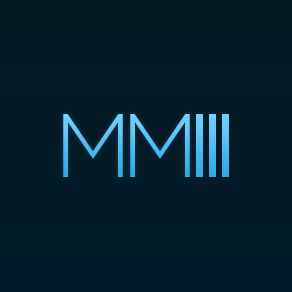
<style>
.page{position:relative;width:292px;height:292px}
.page>*{position:absolute;margin:0}
.t1{font:90px "GothamLight";letter-spacing:-0.08em;color:#57bff4}
</style>
<div class="page">
<p class="t1" style="left:63px;top:114px;width:127px;height:63px">MM</p>
</div>
